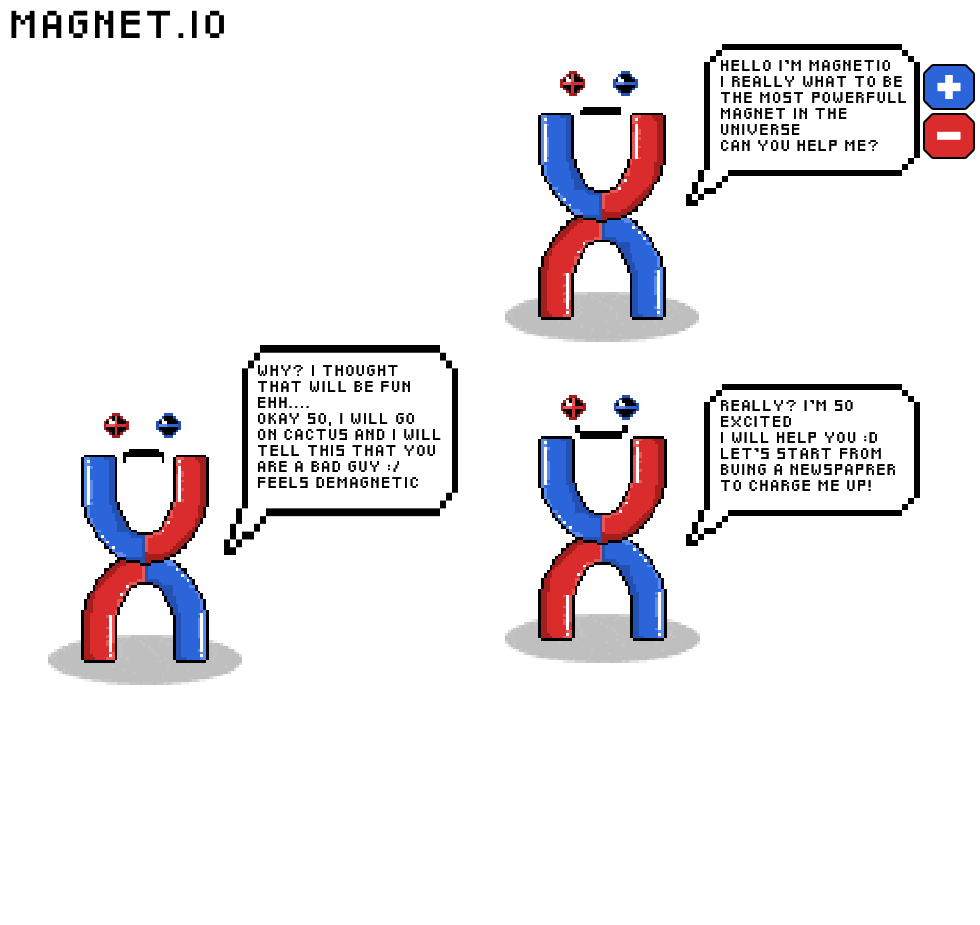
<style>
.page{position:relative;width:980px;height:925px;background:#ffffff}
.page>*{position:absolute;margin:0}
.t1{font:22.6px "Pixeled";letter-spacing:0.154em;color:#000000;text-transform:uppercase}
.t2{font:9px/16px "Pixeled";letter-spacing:0.174em;color:#000000;text-transform:uppercase}
</style>
<div class="page">
<p class="t1" style="left:11px;top:10px;width:213px;height:28px">MAGNET.IO</p>
<p class="t2" style="left:721px;top:60px;width:185px;height:91px">Hello I’m Magnetio<br>I really what to be<br>the most powerfull<br>Magnet in the universe<br>can you help me?</p>
<p class="t2" style="left:258px;top:365px;width:183px;height:123px">Why? I thought that will be fun<br>ehh....<br>okay so, I will go on cactus and I will tell this that you<br>are a bad guy :/<br>feels demagnetic</p>
<p class="t2" style="left:721px;top:400px;width:174px;height:91px">Really? I’m So excited<br>I will help you :D<br>Let’s start from buing a newspaprer to charge me up!</p>
</div>
